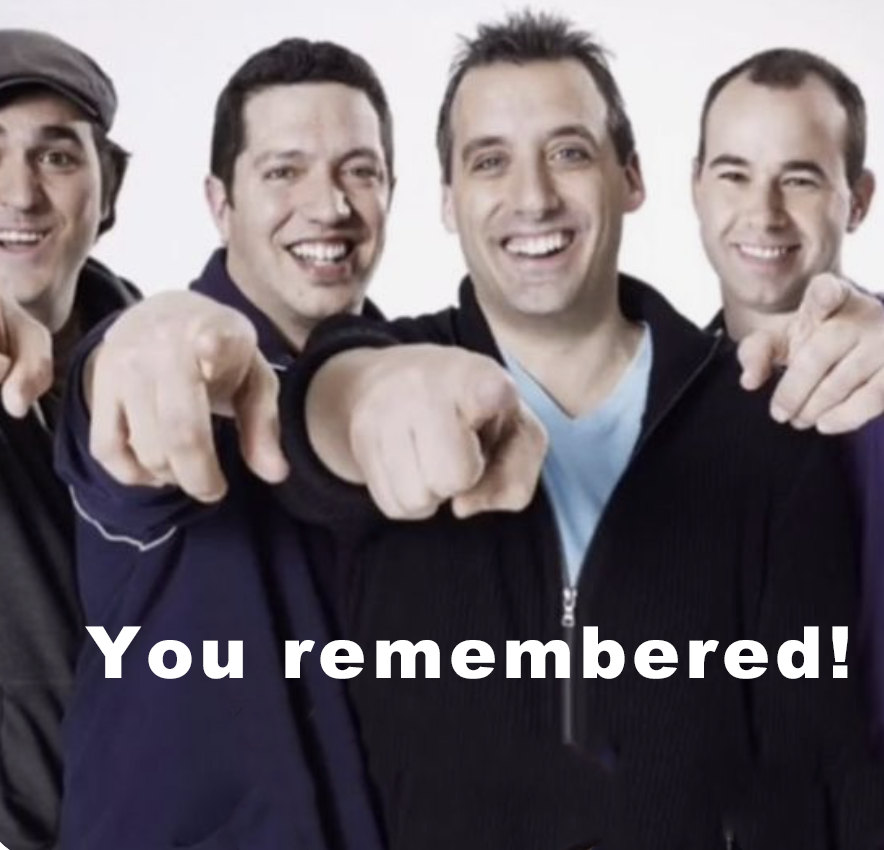
<style>
.page{position:relative;width:884px;height:850px}
.page>*{position:absolute;margin:0}
.t1{font:72px "Arial-Black";letter-spacing:0.07em;color:#ffffff}
</style>
<div class="page">
<p class="t1" style="left:85px;top:626px;width:763px;height:53px">You remembered!</p>
</div>
